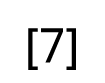
<style>
.page{position:relative;width:105px;height:83px;background:#ffffff}
.page>*{position:absolute;margin:0}
.t1{font:47.9px "DroidSans";color:#000000}
</style>
<div class="page">
<p class="t1" style="left:28px;top:28px;width:48px;height:42px">[7]</p>
</div>
